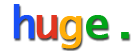
<style>
.page{position:relative;width:137px;height:51px;background:#ffffff}
.page>*{position:absolute;margin:0}
.t1{font:44px "LucidaConsole";color:#184ff6;font-weight:bold}
.t2{font:44px "LucidaConsole";color:#e23520;font-weight:bold}
.t3{font:44px "LucidaConsole";color:#ffae08;font-weight:bold}
.t4{font:44px "LucidaConsole";color:#02a418;font-weight:bold}
</style>
<div class="page">
<p class="t1" style="left:13px;top:4px;width:21px;height:35px">h</p>
<p class="t2" style="left:36px;top:15px;width:21px;height:24px">u</p>
<p class="t3" style="left:59px;top:16px;width:23px;height:33px">g</p>
<p class="t4" style="left:86px;top:15px;width:43px;height:24px">e.</p>
</div>
